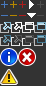
<style>
.page{position:relative;width:46px;height:86px;background:#333333}
.page>*{position:absolute;margin:0}
.t1{font:13px "LithosPro-Black";color:#fefefe}
</style>
<div class="page">
<p class="t1" style="left:22px;top:52px;width:10px;height:11px">X</p>
</div>
